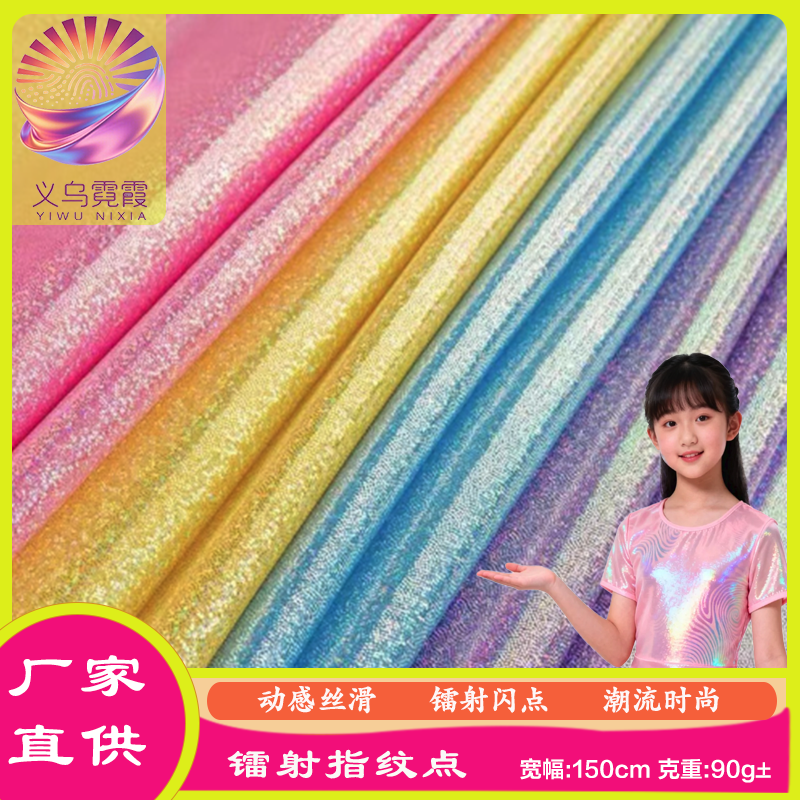
<style>
.page{position:relative;width:800px;height:800px}
.page>*{position:absolute;margin:0}
.t1{font:67px/23px "STBaoliSC-Regular";letter-spacing:0.08em;color:#ffffff}
.t2{font:30px "STKaitiSC-Black";color:#fdf7f7}
.t3{font:45px "STBaoliSC-Regular";letter-spacing:0.08em;color:#f9faf7}
.t4{font:22px "FZLTZHK--GBK1-0";letter-spacing:0.02em;color:#ffffff}
.t5{font:27px "STXihei";letter-spacing:0.08em;color:#ffffff}
.t6{font:23px "FZLTZHK--GBK1-0";letter-spacing:0.02em;color:#ffffff}
.t7{font:27px "FZLTZHK--GBK1-0";letter-spacing:0.08em;color:#ffffff}
</style>
<div class="page">
<p class="t1" style="left:8px;top:655px;width:138px;height:111px;text-align:center">厂家<br><br><br>直供</p>
<p class="t2" style="left:257px;top:685px;width:462px;height:29px">动感丝滑       镭射闪点       潮流时尚</p>
<p class="t3" style="left:227px;top:749px;width:240px;height:30px">镭射指纹点</p>
<p class="t4" style="left:520px;top:758px;width:251px;height:25px"><span class="t5">             </span>宽幅:150cm 克重:90g<span class="t6">+</span></p>
<p class="t7" style="left:755px;top:775px;width:16px;height:3px">-</p>
</div>
